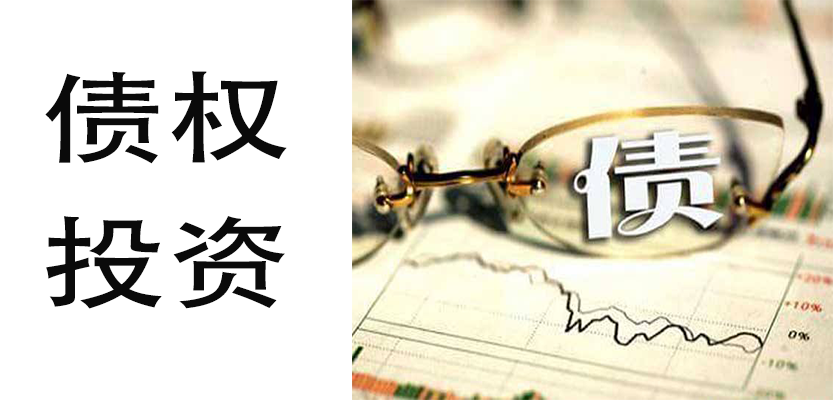
<style>
.page{position:relative;width:833px;height:400px;background:#ffffff}
.page>*{position:absolute;margin:0}
.t1{font:100px "AdobeHeitiStd-Regular";color:#0a0a0a;scale:1.25 1}
</style>
<div class="page">
<p class="t1" style="left:45px;top:71px;width:242px;height:93px">债权</p>
<p class="t1" style="left:46px;top:216px;width:239px;height:93px">投资</p>
</div>
